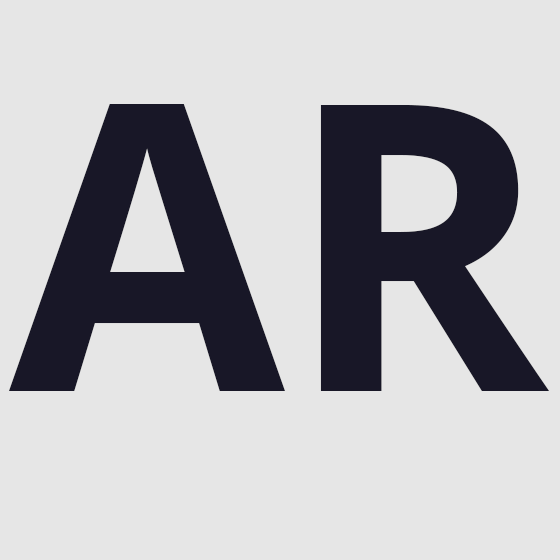
<style>
.page{position:relative;width:560px;height:560px;background:#e6e6e6}
.page>*{position:absolute;margin:0}
.t1{font:400px "OpenSans-Bold";color:#181727;text-transform:uppercase}
</style>
<div class="page">
<p class="t1" style="left:9px;top:104px;width:541px;height:287px">AR</p>
</div>
